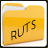
<style>
.page{position:relative;width:48px;height:48px}
.page>*{position:absolute;margin:0}
.t1{font:12px "MyriadPro-Regular"}
</style>
<div class="page">
<p class="t1" style="left:11px;top:19px;width:25px;height:22px">RUTS</p>
</div>
